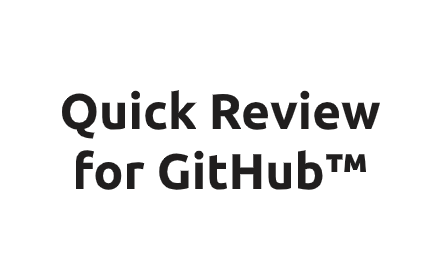
<style>
.page{position:relative;width:440px;height:280px;background:#ffffff}
.page>*{position:absolute;margin:0}
.t1{font:50px "Ubuntu-Bold";color:#201e1e}
</style>
<div class="page">
<p class="t1" style="left:61px;top:90px;width:319px;height:100px;text-align:center">Quick Review<br>for GitHub™</p>
</div>
